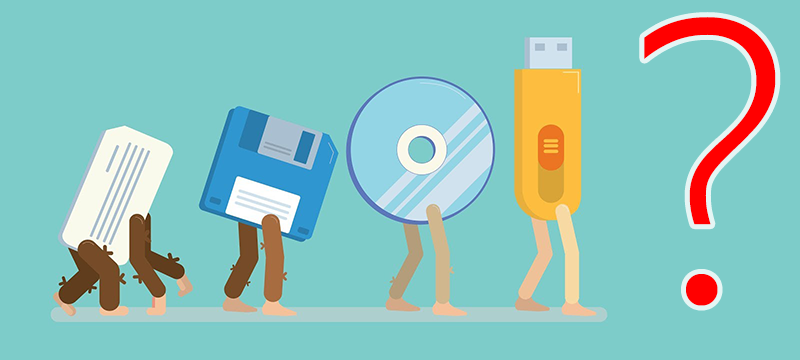
<style>
.page{position:relative;width:800px;height:360px;background:#7dccc9}
.page>*{position:absolute;margin:0}
.t1{font:400px "SegoeUI-Light";color:#ff0000}
</style>
<div class="page">
<p class="t1" style="left:644px;top:17px;width:132px;height:289px">?</p>
</div>
